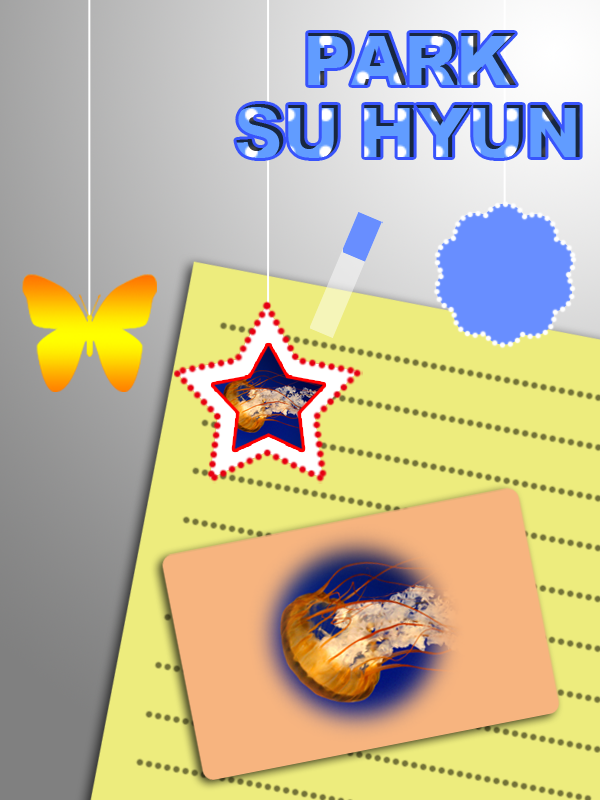
<style>
.page{position:relative;width:600px;height:800px;background:#edec7d}
.page>*{position:absolute;margin:0}
.t1{font:72px/72px "Arial-Black";letter-spacing:-0.05em;text-transform:uppercase}
</style>
<div class="page">
<p class="t1" style="left:236px;top:33px;width:344px;height:125px;text-align:center">Park<br>su hyun</p>
</div>
